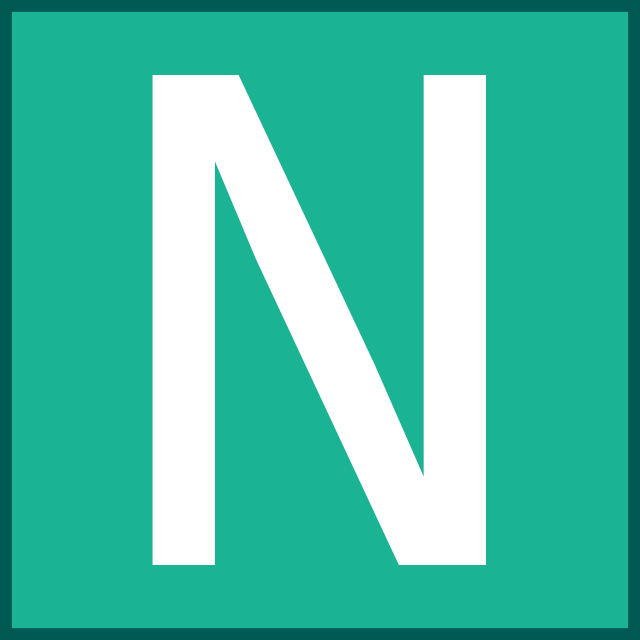
<style>
.page{position:relative;width:640px;height:640px;background:#1ab394}
.page>*{position:absolute;margin:0}
.t1{font:768px "Consolas";letter-spacing:-0.05em;color:#ffffff}
</style>
<div class="page">
<p class="t1" style="left:152px;top:75px;width:334px;height:490px">N</p>
</div>
